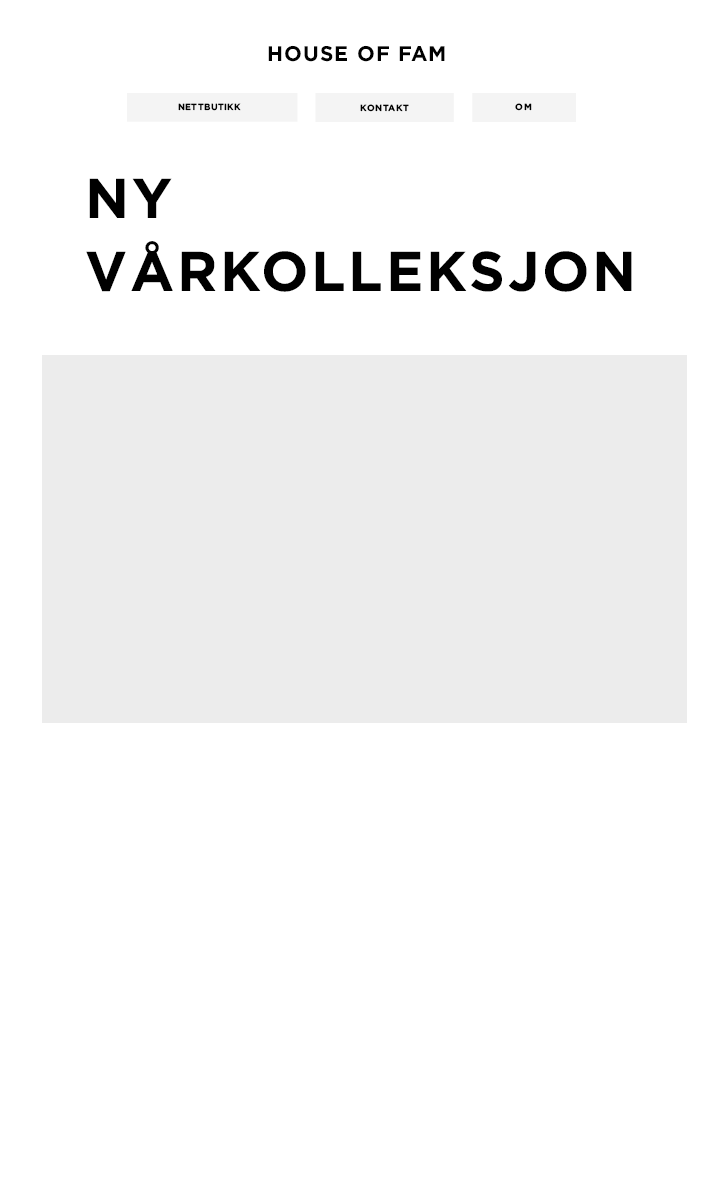
<style>
.page{position:relative;width:720px;height:1200px;background:#ffffff}
.page>*{position:absolute;margin:0}
.t1{font:21.2px "Gotham-Bold";letter-spacing:0.05em;color:#000000}
.t2{font:8.9px "Gotham-Bold";letter-spacing:0.05em;color:#000000}
.t3{font:56px/73.4px "Gotham-Bold";letter-spacing:0.05em;color:#000000;text-transform:uppercase}
</style>
<div class="page">
<p class="t1" style="left:268px;top:45px;width:177px;height:17px">HOUSE OF FAM</p>
<p class="t2" style="left:178px;top:103px;width:63px;height:8px">NETTBUTIKK</p>
<p class="t2" style="left:360px;top:104px;width:49px;height:8px">KONTAKT</p>
<p class="t2" style="left:515px;top:103px;width:17px;height:8px">OM</p>
<p class="t3" style="left:86px;top:178px;width:546px;height:114px">Ny vårkolleksjon</p>
</div>
